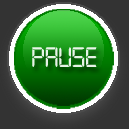
<style>
.page{position:relative;width:129px;height:129px}
.page>*{position:absolute;margin:0}
.t1{font:30px "Digital-7";letter-spacing:-0.02em;color:#ffffff}
</style>
<div class="page">
<p class="t1" style="left:32px;top:47px;width:65px;height:20px;opacity:0.9">PAUSE</p>
</div>
